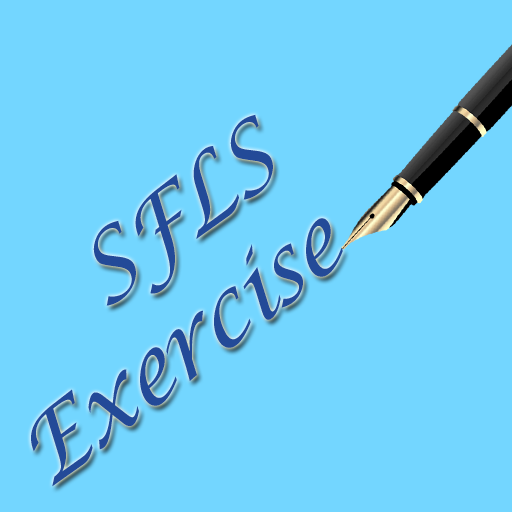
<style>
.page{position:relative;width:512px;height:512px;background:#73d6ff}
.page>*{position:absolute;margin:0}
.t1{font:89.2px "LucidaCalligraphy-Italic";letter-spacing:-0.025em;color:#234a98;font-style:italic}
</style>
<div class="page">
<p class="t1" style="left:31px;top:114px;width:312px;height:373px;text-align:right;rotate:-38deg">SFLS<br>Exercise</p>
</div>
